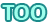
<style>
.page{position:relative;width:48px;height:25px;background:#ffffff}
.page>*{position:absolute;margin:0}
.t1{font:24px "Calibri-Bold";color:#9effec}
</style>
<div class="page">
<p class="t1" style="left:2px;top:5px;width:44px;height:15px">TOO</p>
</div>
